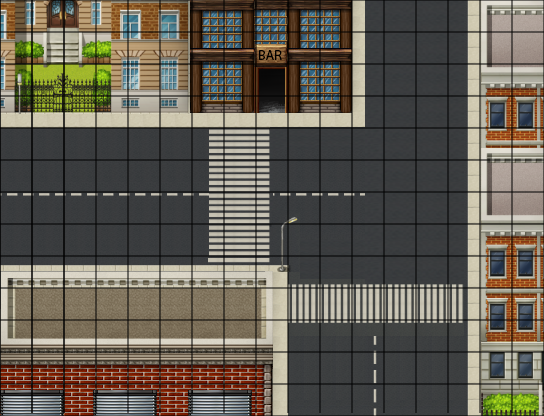
<style>
.page{position:relative;width:544px;height:416px}
.page>*{position:absolute;margin:0}
.t1{font:14px "MyriadPro-Regular";color:#000000}
</style>
<div class="page">
<p class="t1" style="left:259px;top:50px;width:23px;height:10px">BAR</p>
</div>
